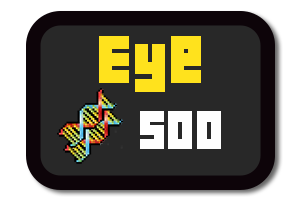
<style>
.page{position:relative;width:300px;height:200px;background:#282828}
.page>*{position:absolute;margin:0}
.t1{font:60px "04b19";letter-spacing:0.025em;color:#ffe21d}
.t2{font:48px "04b19";letter-spacing:0.025em;color:#ffffff}
</style>
<div class="page">
<p class="t1" style="left:99px;top:36px;width:102px;height:56px">Eye</p>
<p class="t2" style="left:140px;top:111px;width:81px;height:38px">500</p>
</div>
